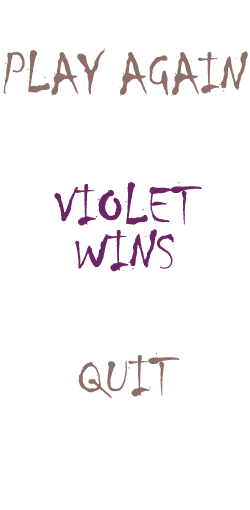
<style>
.page{position:relative;width:250px;height:510px;background:#ffffff}
.page>*{position:absolute;margin:0}
.t1{font:58.3px "Chiller-Regular";color:#8e6f67}
.t2{font:58.3px "Chiller-Regular";color:#6c2466}
</style>
<div class="page">
<p class="t1" style="left:3px;top:48px;width:245px;height:48px">PLAY AGAIN</p>
<p class="t2" style="left:54px;top:181px;width:148px;height:91px">VIOLET WINS</p>
<p class="t1" style="left:78px;top:352px;width:102px;height:46px">QUIT</p>
</div>
